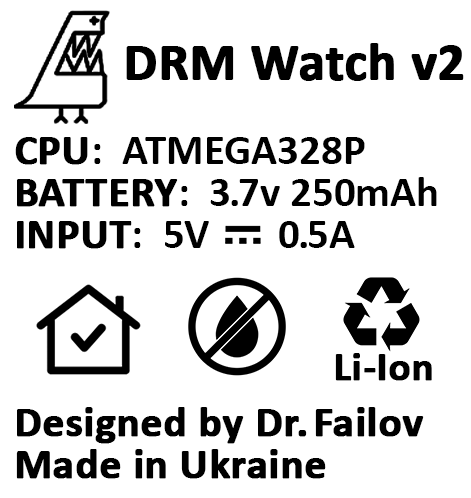
<style>
.page{position:relative;width:471px;height:498px;background:#ffffff}
.page>*{position:absolute;margin:0}
.t1{font:43px/42px "Calibri-Bold";color:#000000;font-weight:bold}
.t2{font:36px "Calibri-Bold";color:#000000;font-weight:bold}
.t3{font:53px "Calibri-Bold";color:#000000;font-weight:bold}
.t4{font:43px/42px "Calibri-Bold";color:#000000}
.t5{font:43px/42px "Calibri-Bold";letter-spacing:-0.05em;color:#000000}
.t6{font:43px/42px "Calibri-Bold";letter-spacing:0.1em;color:#000000;font-weight:bold}
.t7{font:41px "Calibri-Bold";color:#000000;font-weight:bold}
</style>
<div class="page">
<p class="t1" style="left:15px;top:43px;width:449px;height:436px"><span class="t2">            </span><span class="t3">DRM Watch v2<br><br></span>CPU<span class="t4">:  ATMEGA328P</span><br>BATTERY<span class="t4">:  </span><span class="t5">3.</span><span class="t4">7v 250mAh<br></span>INPUT<span class="t4">:  5V       </span><span class="t5">0.</span><span class="t4">5A<br><br><br><br></span>Designed by Dr<span class="t6">.</span>Failov<br>Made in Ukraine</p>
<p class="t7" style="left:335px;top:353px;width:97px;height:28px">Li-Ion</p>
</div>
